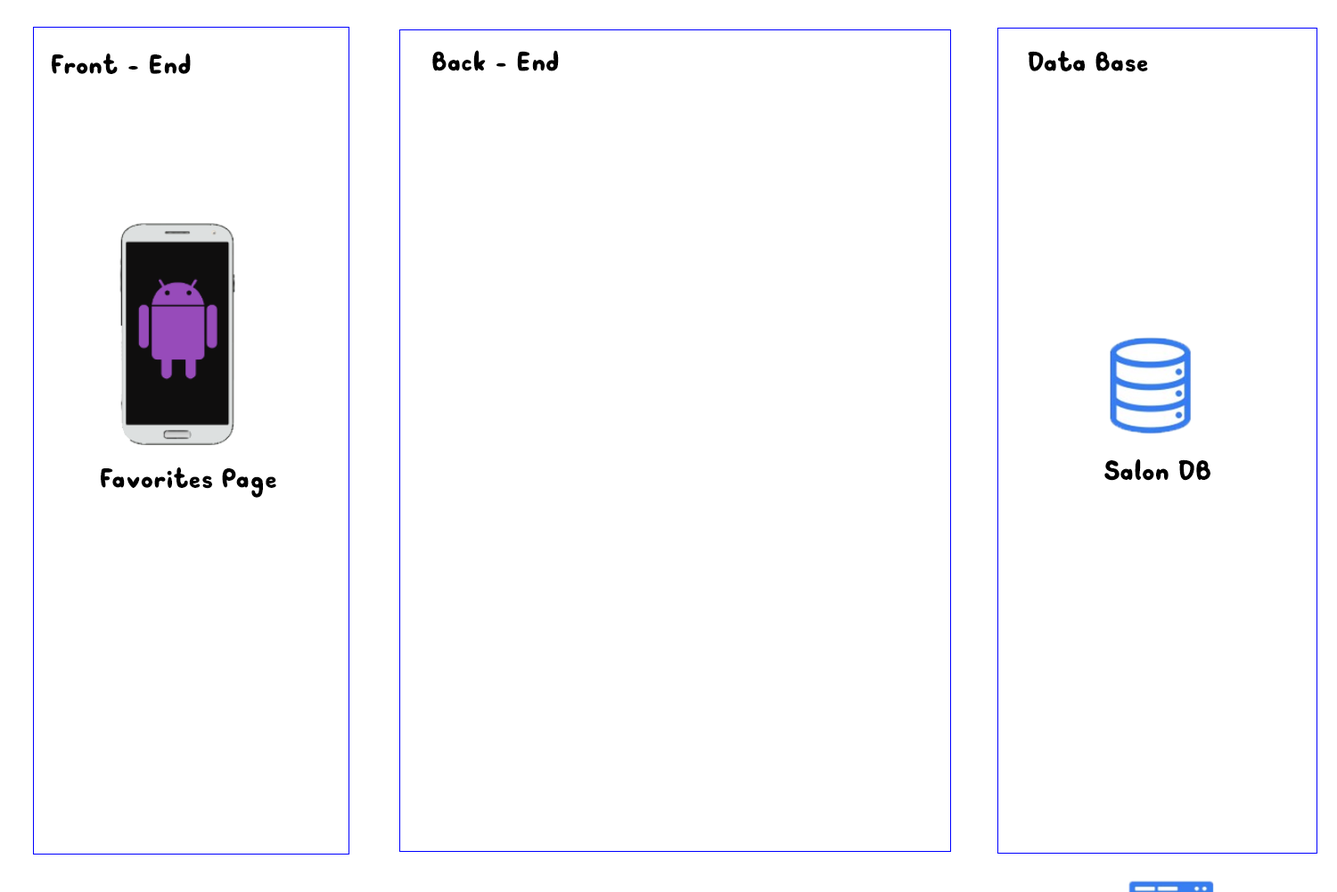
<style>
.page{position:relative;width:1337px;height:892px;background:#ffffff}
.page>*{position:absolute;margin:0}
.t1{font:37.5px "SVN-Bublont";color:#000000}
.t2{font:38.3px "SVN-Bublont";color:#000000}
</style>
<div class="page">
<p class="t1" style="left:52px;top:53px;width:139px;height:21px">Front - End</p>
<p class="t1" style="left:432px;top:50px;width:127px;height:21px">Back - End</p>
<p class="t1" style="left:1028px;top:51px;width:120px;height:21px">Data Base</p>
<p class="t2" style="left:1105px;top:458px;width:106px;height:23px">Salon DB</p>
<p class="t1" style="left:101px;top:467px;width:175px;height:31px">Favorites Page</p>
</div>
